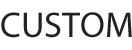
<style>
.page{position:relative;width:132px;height:50px;background:#ffffff}
.page>*{position:absolute;margin:0}
.t1{font:36px "MyriadPro-Regular";color:#24211e}
</style>
<div class="page">
<p class="t1" style="left:1px;top:12px;width:131px;height:26px">CUSTOM</p>
</div>
